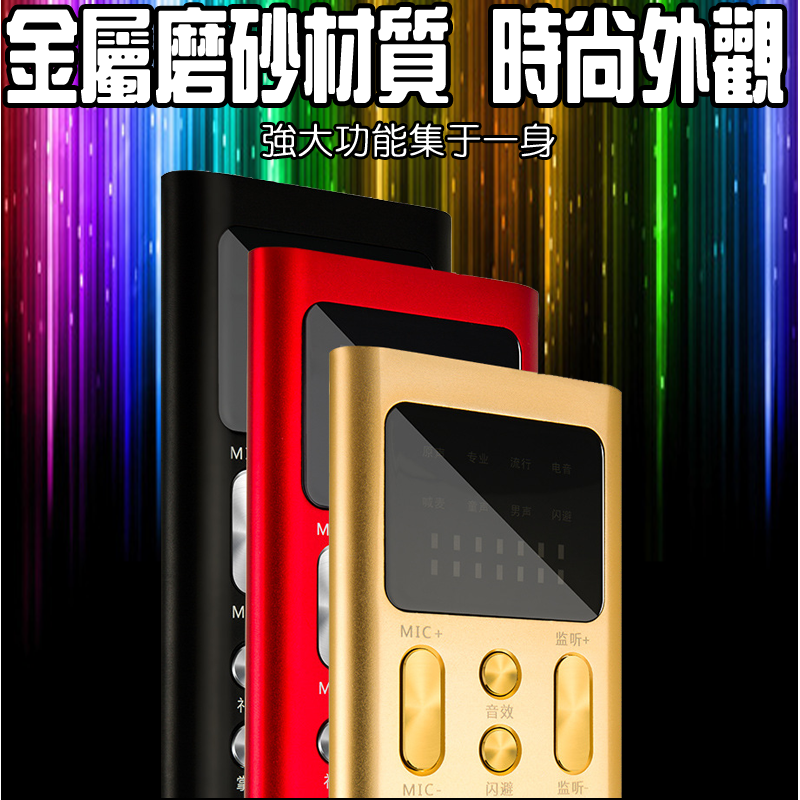
<style>
.page{position:relative;width:800px;height:800px}
.page>*{position:absolute;margin:0}
.t1{font:100.1px "HanWangZonYi";color:#ffffff;font-weight:bold;scale:0.72 1}
.t2{font:36px "HanWangYenLight";color:#ffffff;font-weight:bold}
</style>
<div class="page">
<p class="t1" style="left:6px;top:6px;width:778px;height:98px">金屬磨砂材質 時尚外觀</p>
<p class="t2" style="left:262px;top:123px;width:293px;height:34px">強大功能集于一身</p>
</div>
